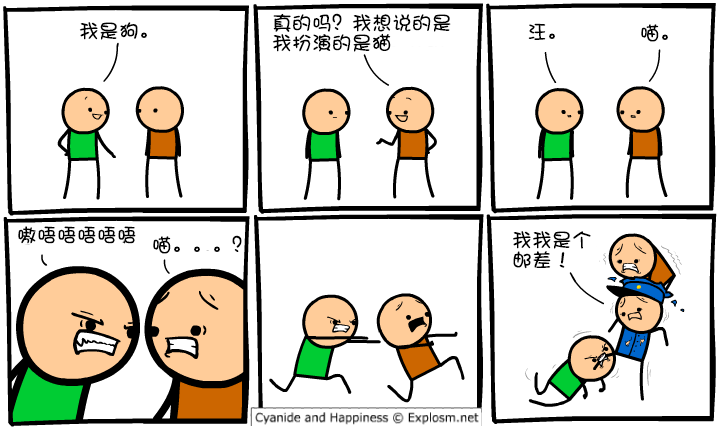
<style>
.page{position:relative;width:720px;height:430px;background:#ffffff}
.page>*{position:absolute;margin:0}
.t1{font:20px/20px "DFShaoNvW5";color:#000000}
.t2{font:20px "DFShaoNvW5";color:#000000}
</style>
<div class="page">
<p class="t1" style="left:272px;top:13px;width:179px;height:39px">真的吗？我想说的是<br>我扮演的是猫</p>
<p class="t2" style="left:79px;top:22px;width:68px;height:18px">我是狗。</p>
<p class="t2" style="left:528px;top:23px;width:27px;height:17px">汪。</p>
<p class="t2" style="left:641px;top:24px;width:27px;height:18px">喵。</p>
<p class="t2" style="left:18px;top:226px;width:118px;height:18px">嗷唔唔唔唔唔</p>
<p class="t1" style="left:513px;top:231px;width:78px;height:38px">我我是个<br>邮差！</p>
<p class="t2" style="left:153px;top:235px;width:89px;height:19px">喵。。。？</p>
</div>
